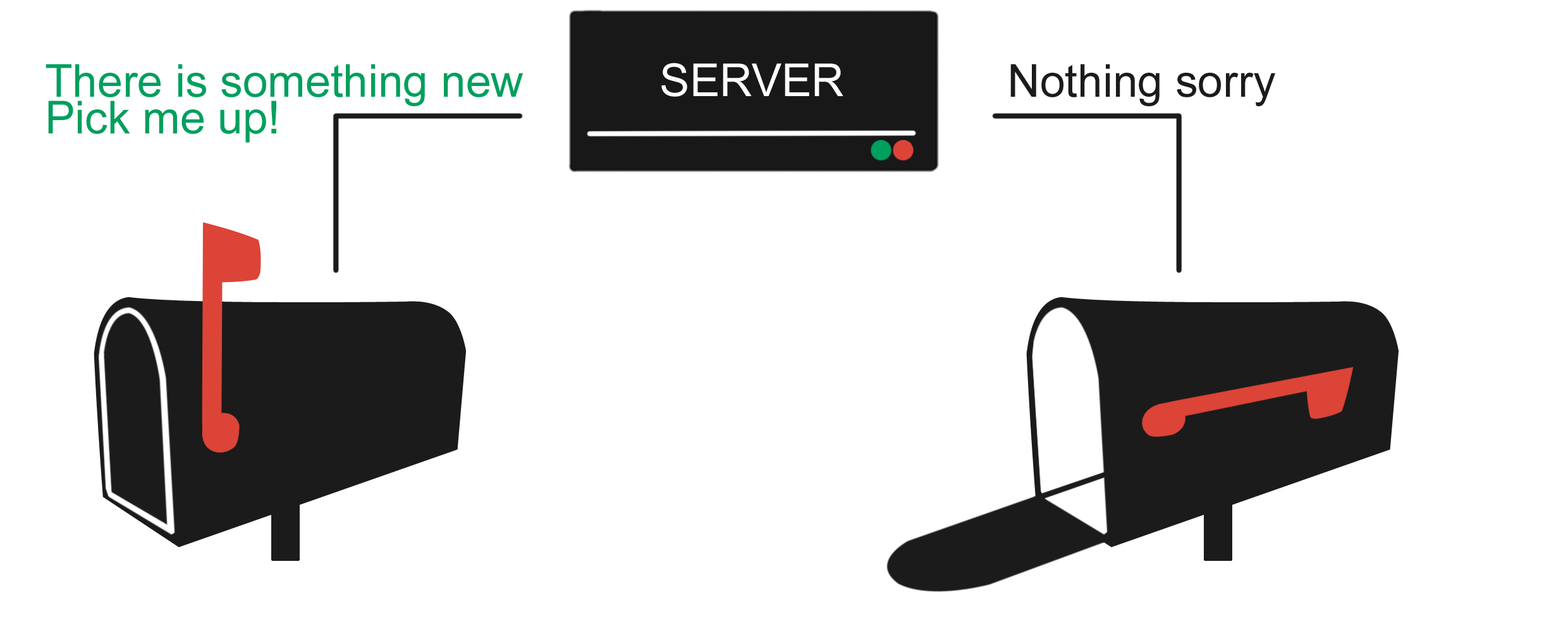
<style>
.page{position:relative;width:1568px;height:626px;background:#ffffff}
.page>*{position:absolute;margin:0}
.t1{font:45.5px/36.9px "ArialMT";color:#009f5d}
.t2{font:45.5px "ArialMT";color:#ffffff}
.t3{font:45.5px "ArialMT";color:#1b1b1b}
</style>
<div class="page">
<p class="t1" style="left:46px;top:64px;width:477px;height:79px">There is something new<br>Pick me up!</p>
<p class="t2" style="left:661px;top:63px;width:182px;height:34px">SERVER</p>
<p class="t3" style="left:1010px;top:64px;width:265px;height:42px">Nothing sorry</p>
</div>
